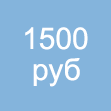
<style>
.page{position:relative;width:111px;height:111px;background:#84b4dc}
.page>*{position:absolute;margin:0}
.t1{font:30px "ArialMT";color:#ffffff}
</style>
<div class="page">
<p class="t1" style="left:25px;top:27px;width:63px;height:23px">1500</p>
<p class="t1" style="left:33px;top:58px;width:47px;height:29px">руб</p>
</div>
